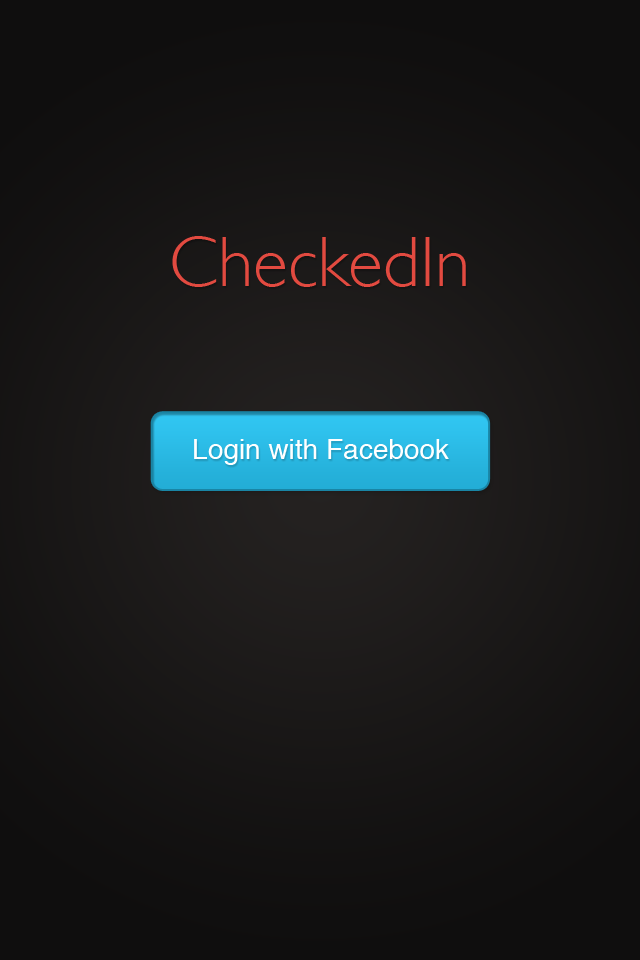
<style>
.page{position:relative;width:640px;height:960px}
.page>*{position:absolute;margin:0}
.t1{font:72px "GillSans-Light";color:#e24a40}
.t2{font:28px "Helvetica";color:#ffffff}
</style>
<div class="page">
<p class="t1" style="left:172px;top:236px;width:294px;height:51px">CheckedIn</p>
<p class="t2" style="left:194px;top:439px;width:255px;height:26px">Login with Facebook</p>
</div>
